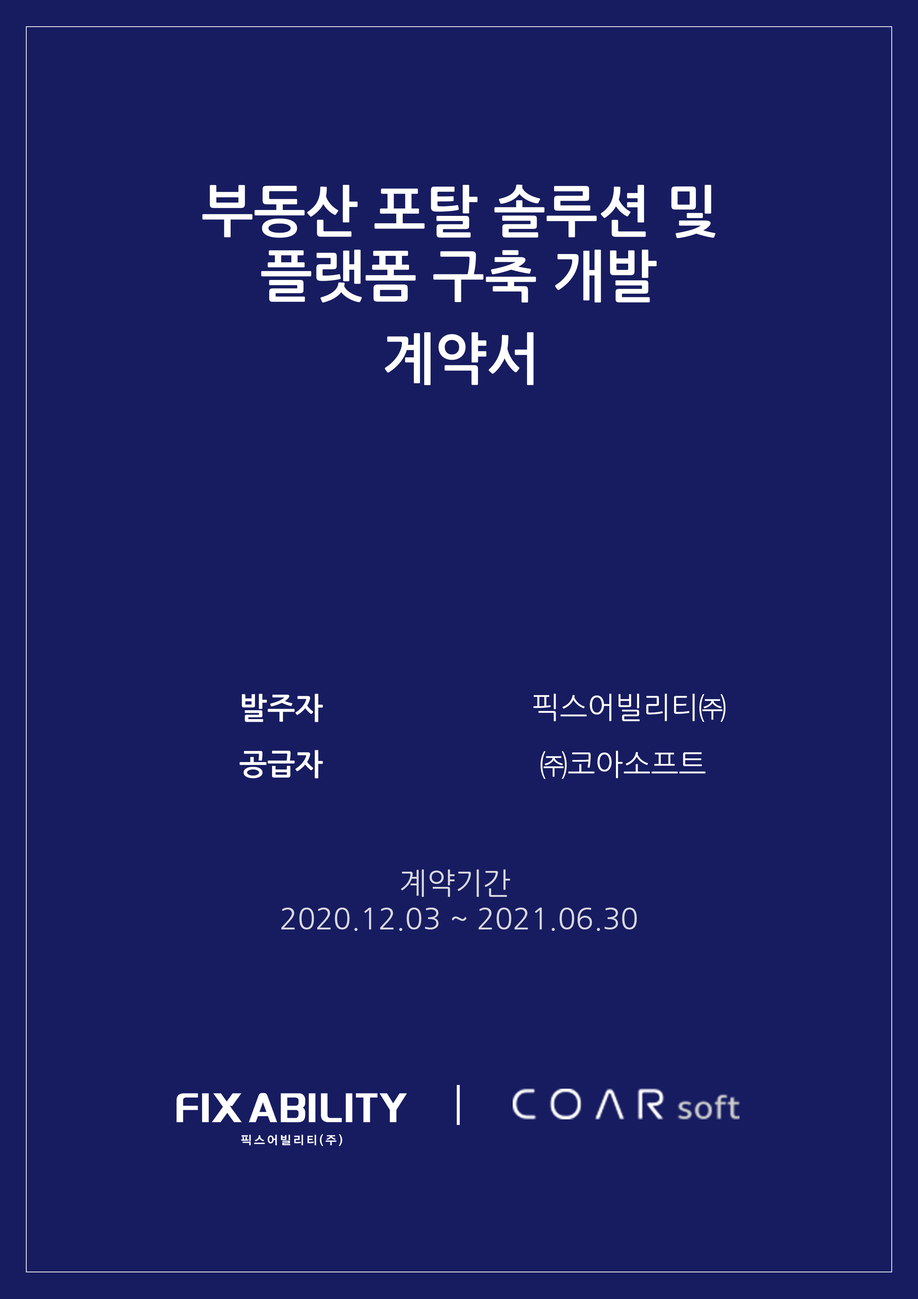
<style>
.page{position:relative;width:918px;height:1299px;background:#171c61}
.page>*{position:absolute;margin:0}
.t1{font:55.6px "NanumGothicBold";color:#ffffff}
.t2{font:55.4px "NanumGothicBold";color:#ffffff}
.t3{font:29.6px "NanumGothicBold";color:#ffffff}
.t4{font:29.6px "NanumGothic";color:#ffffff}
.t5{font:29.6px "NanumGothic";color:#d8d8e0}
</style>
<div class="page">
<p class="t1" style="left:202px;top:184px;width:514px;height:54px">부동산 포탈 솔루션 및</p>
<p class="t1" style="left:261px;top:250px;width:396px;height:52px">플랫폼 구축 개발</p>
<p class="t2" style="left:385px;top:332px;width:149px;height:53px">계약서</p>
<p class="t3" style="left:242px;top:693px;width:81px;height:29px">발주자</p>
<p class="t4" style="left:533px;top:693px;width:193px;height:29px">픽스어빌리티㈜</p>
<p class="t3" style="left:240px;top:750px;width:83px;height:28px">공급자</p>
<p class="t4" style="left:541px;top:750px;width:165px;height:29px">㈜코아소프트</p>
<p class="t5" style="left:281px;top:869px;width:356px;height:62px;text-align:center">계약기간<br> 2020.12.03 ~ 2021.06.30</p>
</div>
